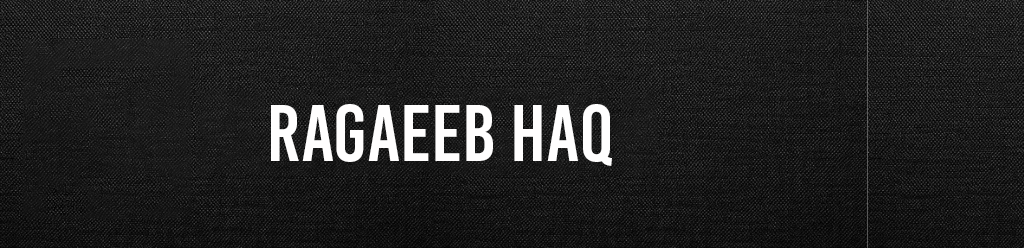
<style>
.page{position:relative;width:1024px;height:248px}
.page>*{position:absolute;margin:0}
.t1{font:80px "BebasKai";color:#fffefe;text-transform:uppercase}
</style>
<div class="page">
<p class="t1" style="left:271px;top:104px;width:341px;height:62px">ragaeeb haq</p>
</div>
